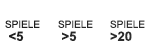
<style>
.page{position:relative;width:150px;height:56px;background:#ffffff}
.page>*{position:absolute;margin:0}
.t1{font:10px/13px "ArialMT";color:#202020}
.t2{font:13px/13px "Arial-BoldMT";color:#202020}
.t3{font:10px/13px "ArialMT";color:#282828}
.t4{font:13px/13px "Arial-BoldMT";color:#282828}
.t5{font:10px/13px "ArialMT";color:#2d2d2d}
.t6{font:13px/13px "Arial-BoldMT";color:#2d2d2d}
</style>
<div class="page">
<p class="t1" style="left:5px;top:20px;width:35px;height:21px">SPIELE<br><span class="t2"> &lt;5</span></p>
<p class="t3" style="left:58px;top:20px;width:35px;height:21px">SPIELE<br><span class="t4"> &gt;5</span></p>
<p class="t5" style="left:110px;top:20px;width:35px;height:21px">SPIELE<br><span class="t6">&gt;20</span></p>
</div>
